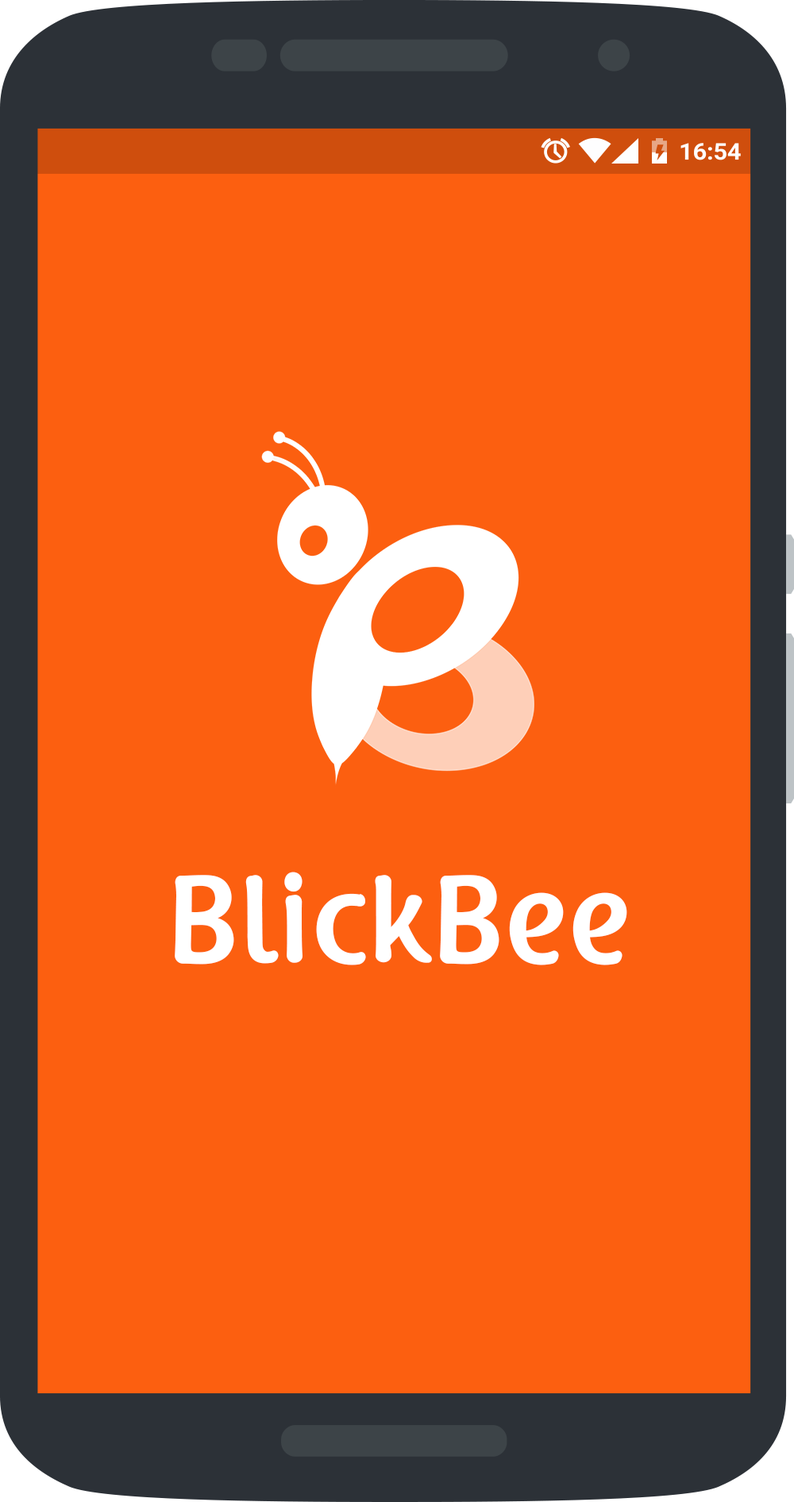
<style>
.page{position:relative;width:794px;height:1502px;background:#fc5f10}
.page>*{position:absolute;margin:0}
.t1{font:120.8px "RaspoutineClassic";letter-spacing:0.02em;color:#ffffff;font-weight:bold}
</style>
<div class="page">
<p class="t1" style="left:175px;top:872px;width:452px;height:93px">BlickBee</p>
</div>
